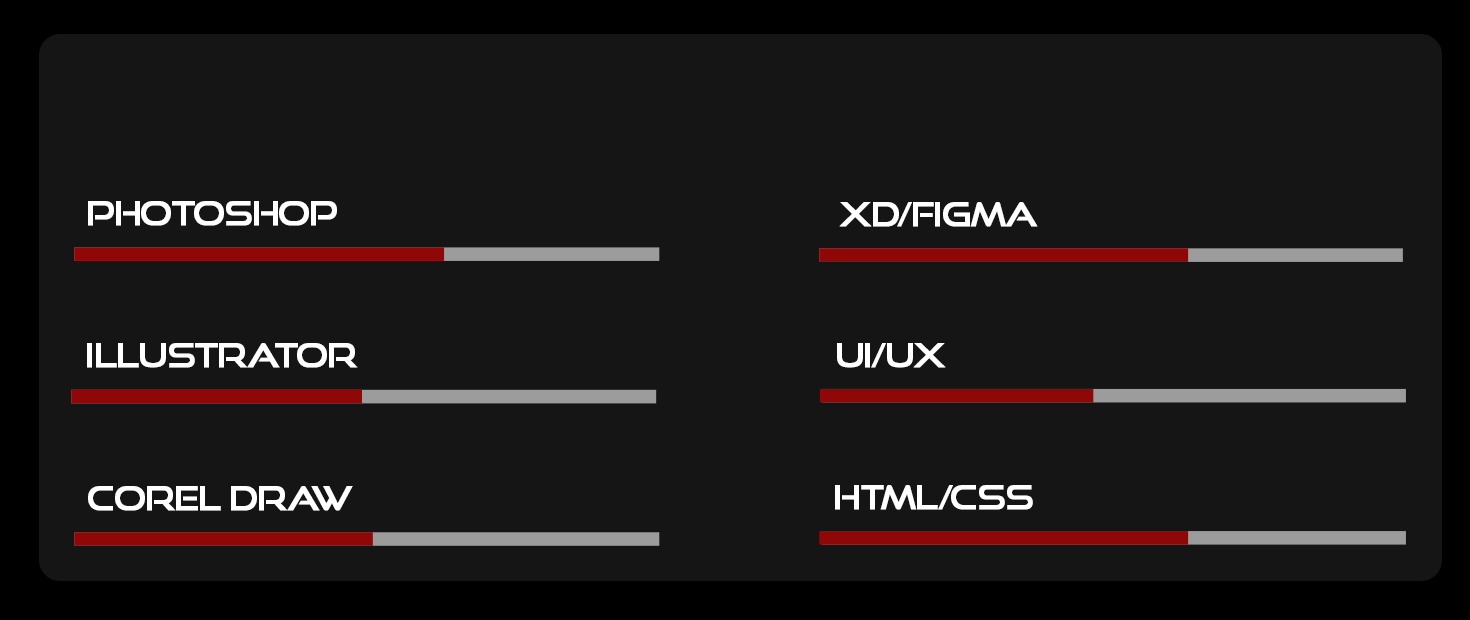
<style>
.page{position:relative;width:1470px;height:620px;background:#151515}
.page>*{position:absolute;margin:0}
.t1{font:32.2px "GoodTimesRg-Regular";letter-spacing:-0.04em;color:#ffffff;font-weight:bold}
</style>
<div class="page">
<p class="t1" style="left:88px;top:201px;width:249px;height:25px">Photoshop</p>
<p class="t1" style="left:839px;top:202px;width:199px;height:25px">Xd/Figma</p>
<p class="t1" style="left:87px;top:343px;width:271px;height:25px">Illustrator</p>
<p class="t1" style="left:837px;top:343px;width:109px;height:25px">UI/UX</p>
<p class="t1" style="left:88px;top:486px;width:265px;height:25px">Corel Draw</p>
<p class="t1" style="left:835px;top:485px;width:198px;height:25px">HTML/CSS</p>
</div>
